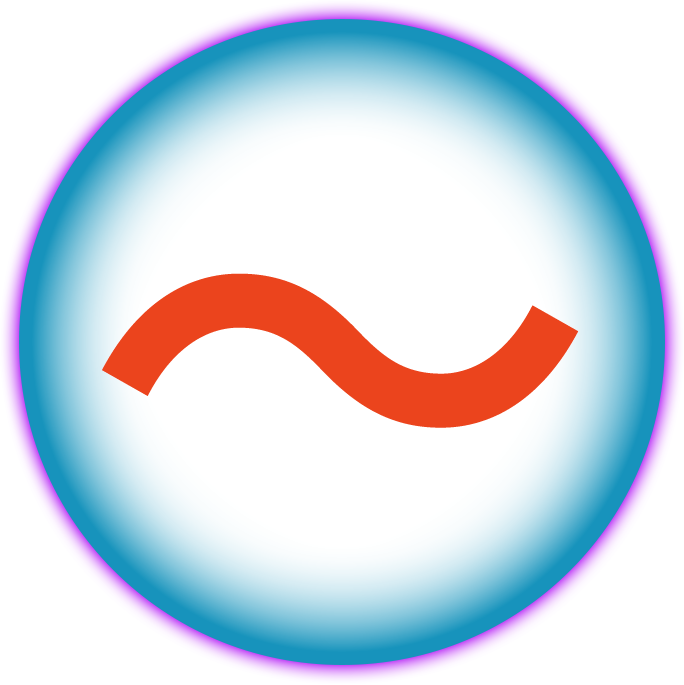
<style>
.page{position:relative;width:684px;height:685px;background:#ffffff}
.page>*{position:absolute;margin:0}
.t1{font:537.8px "AdobeHeitiStd-Regular";color:#eb441d;scale:0.96 1}
</style>
<div class="page">
<p class="t1" style="left:102px;top:273px;width:477px;height:155px">~</p>
</div>
